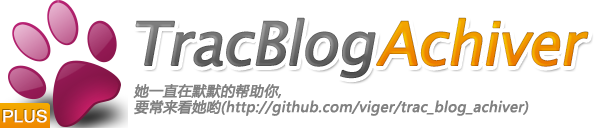
<style>
.page{position:relative;width:600px;height:128px;background:#ffffff}
.page>*{position:absolute;margin:0}
.t1{font:60px "LucidaSansUnicode";color:#676767;font-weight:bold;font-style:italic}
.t2{font:60px "LucidaSansUnicode";color:#ef8a00;font-weight:bold;font-style:italic}
.t3{font:14px/16px "MicrosoftYaHei";color:#818181;font-weight:bold;font-style:italic}
</style>
<div class="page">
<p class="t1" style="left:135px;top:17px;width:454px;height:62px">TracBlog<span class="t2">Achiver</span></p>
<p class="t3" style="left:133px;top:84px;width:396px;height:32px">她一直在默默的帮助你,<br>要常来看她哟(http://github.com/viger/trac_blog_achiver)</p>
</div>
